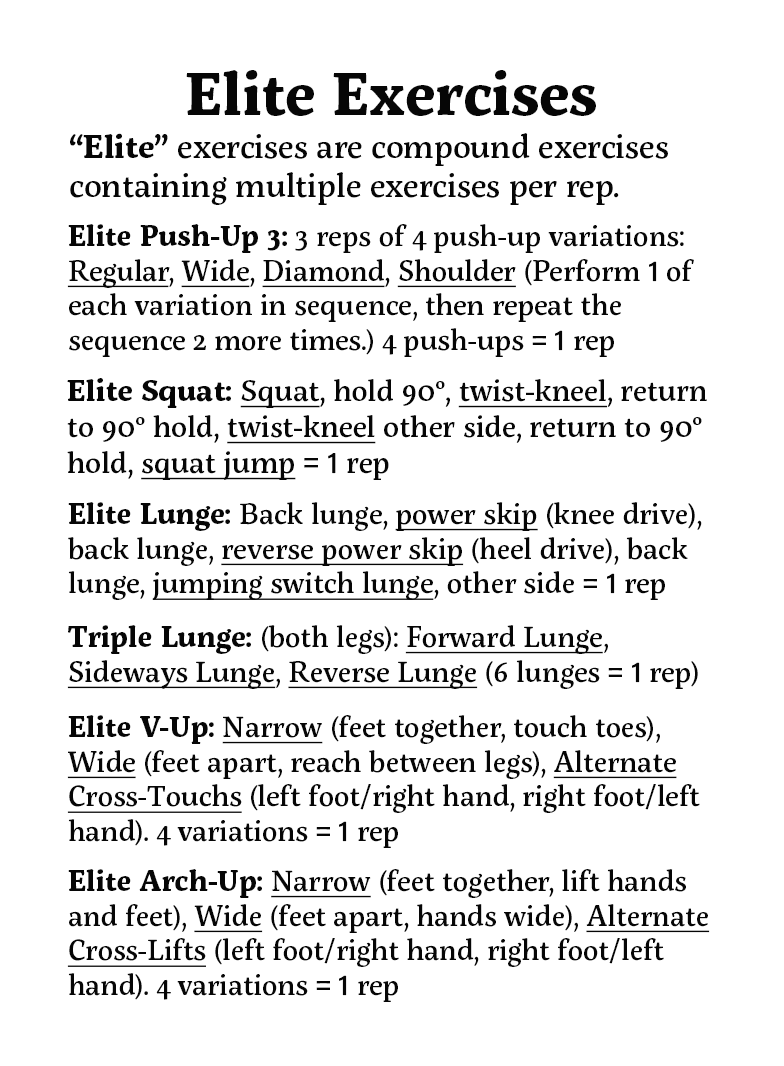
<style>
.page{position:relative;width:784px;height:1066px;background:#ffffff}
.page>*{position:absolute;margin:0}
.t1{font:60px "ServusSlab-Bold";color:#060606}
.t2{font:33px "ServusSlab-Medium";color:#060606}
.t3{font:32.5px "ServusSlab-Bold";color:#060606}
.t4{font:29px "ServusSlab-Medium";color:#060606}
.t5{font:29px "ServusSlab-Bold";color:#060606}
.t6{font:29px "ServusSlab-Medium";color:#060606;text-decoration:underline}
.t7{font:29px "AcuminConcept-Medium";color:#060606}
.t8{font:30px "ServusSlab-Medium";color:#060606}
.t9{font:30px "ServusSlab-Bold";color:#060606}
.t10{font:30px "ServusSlab-Medium";color:#060606;text-decoration:underline}
.t11{font:30px "AcuminConcept-Medium";color:#060606}
</style>
<div class="page">
<p class="t1" style="left:186px;top:70px;width:410px;height:46px">Elite Exercises</p>
<p class="t2" style="left:70px;top:133px;width:598px;height:72px"><span class="t3">“Elite” </span>exercises are compound exercises containing multiple exercises per rep.</p>
<p class="t4" style="left:67px;top:224px;width:627px;height:133px"><span class="t5">Elite Push-Up 3:</span> 3 reps of 4 push-up variations:<br><span class="t6">Regular</span>, <span class="t6">Wide</span>, <span class="t6">Diamond</span>, <span class="t6">Shoulder</span> (Perform <span class="t7">1</span> of each variation in sequence, then repeat the sequence 2 more times.) 4 push-ups = <span class="t7">1</span> rep</p>
<p class="t8" style="left:67px;top:378px;width:640px;height:102px"><span class="t9">Elite Squat: </span><span class="t10">Squat</span>, hold 90°, <span class="t10">twist-kneel</span>, return to 90° hold, <span class="t10">twist-kneel</span> other side, return to 90° hold, <span class="t10">squat jump</span> = <span class="t11">1</span> rep</p>
<p class="t4" style="left:68px;top:502px;width:634px;height:98px"><span class="t5">Elite Lunge: </span>Back lunge, <span class="t6">power skip</span> (knee drive), back lunge, <span class="t6">reverse power skip</span> (heel drive), back lunge, <span class="t6">jumping switch lunge</span>, other side = <span class="t7">1</span> rep</p>
<p class="t6" style="left:67px;top:625px;width:631px;height:64px"><span class="t5">Triple Lunge: </span><span class="t4">(both legs): </span>Forward Lunge<span class="t4">, </span>Sideways Lunge<span class="t4">, </span>Reverse Lunge<span class="t4"> (6 lunges = </span><span class="t7">1</span><span class="t4"> rep)</span></p>
<p class="t4" style="left:67px;top:715px;width:633px;height:133px"><span class="t5">Elite V-Up: </span><span class="t6">Narrow</span> (feet together, touch toes), <span class="t6">Wide</span> (feet apart, reach between legs), <span class="t6">Alternate Cross-Touchs</span> (left foot/right hand, right foot/left hand). 4 variations = <span class="t7">1</span> rep</p>
<p class="t4" style="left:67px;top:869px;width:643px;height:133px"><span class="t5">Elite Arch-Up: </span><span class="t6">Narrow</span> (feet together, lift hands and feet), <span class="t6">Wide</span> (feet apart, hands wide), <span class="t6">Alternate Cross-Lifts</span> (left foot/right hand, right foot/left hand). 4 variations = <span class="t7">1</span> rep</p>
</div>
